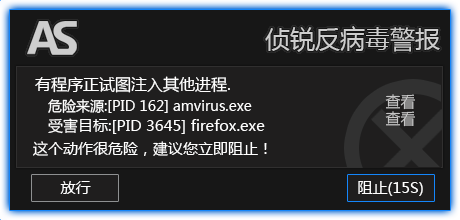
<style>
.page{position:relative;width:460px;height:220px;background:#1f1e1e}
.page>*{position:absolute;margin:0}
.t1{font:16px "MicrosoftYaHei";color:#ffffff}
.t2{font:14px "MicrosoftYaHei";color:#ffffff}
.t3{font:15px "MicrosoftYaHei";color:#ffffff}
</style>
<div class="page">
<p class="t1" style="left:35px;top:76px;width:195px;height:17px">有程序正试图注入其他进程.</p>
<p class="t2" style="left:48px;top:99px;width:204px;height:14px">危险来源:[PID 162] amvirus.exe</p>
<p class="t3" style="left:48px;top:118px;width:217px;height:16px">受害目标:[PID 3645] firefox.exe</p>
<p class="t3" style="left:33px;top:141px;width:234px;height:15px">这个动作很危险，建议您立即阻止！</p>
<p class="t3" style="left:60px;top:181px;width:31px;height:13px">放行</p>
<p class="t3" style="left:358px;top:181px;width:65px;height:15px">阻止(15S)</p>
</div>
